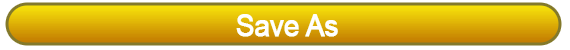
<style>
.page{position:relative;width:570px;height:50px}
.page>*{position:absolute;margin:0}
.t1{font:30.6px "ArialMT";letter-spacing:-0.025em;color:#ffffff;font-weight:bold;scale:0.91 1}
</style>
<div class="page">
<p class="t1" style="left:236px;top:14px;width:102px;height:23px">Save As</p>
</div>
